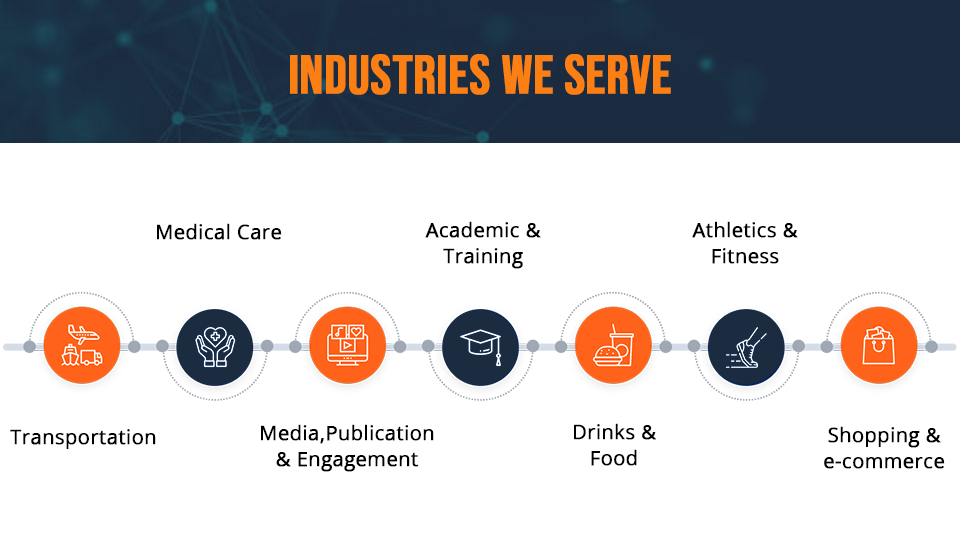
<style>
.page{position:relative;width:960px;height:540px;background:#ffffff}
.page>*{position:absolute;margin:0}
.t1{font:54px "BebasNeue-Regular";color:#fb7f12;font-weight:bold}
.t2{font:20px/25.7px "OpenSans-Regular";color:#000000;font-weight:bold}
.t3{font:20px "OpenSans-Regular";color:#000000;font-weight:bold}
</style>
<div class="page">
<p class="t1" style="left:290px;top:54px;width:381px;height:41px">Industries we serve</p>
<p class="t2" style="left:425px;top:221px;width:116px;height:48px;text-align:center">Academic &amp;<br>Training</p>
<p class="t2" style="left:692px;top:221px;width:106px;height:43px;text-align:center">Athletics &amp;<br>Fitness</p>
<p class="t3" style="left:157px;top:223px;width:125px;height:17px">Medical Care</p>
<p class="t2" style="left:261px;top:424px;width:173px;height:48px;text-align:center">Media,Publication<br>&amp; Engagement</p>
<p class="t2" style="left:574px;top:423px;width:82px;height:43px;text-align:center">Drinks &amp;<br>Food</p>
<p class="t3" style="left:10px;top:429px;width:146px;height:20px">Transportation</p>
<p class="t2" style="left:824px;top:426px;width:121px;height:43px;text-align:center">Shopping &amp;<br>e-commerce</p>
</div>
